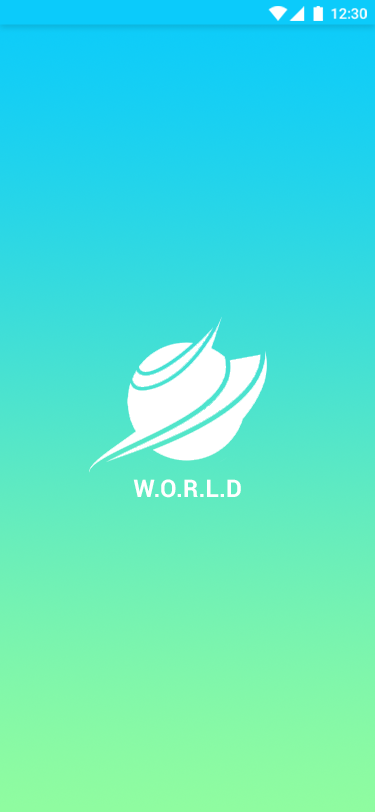
<style>
.page{position:relative;width:375px;height:812px}
.page>*{position:absolute;margin:0}
.t1{font:24px "Roboto-Bold";letter-spacing:0.005em;color:#ffffff}
</style>
<div class="page">
<p class="t1" style="left:133px;top:479px;width:108px;height:19px">W.O.R.L.D</p>
</div>
